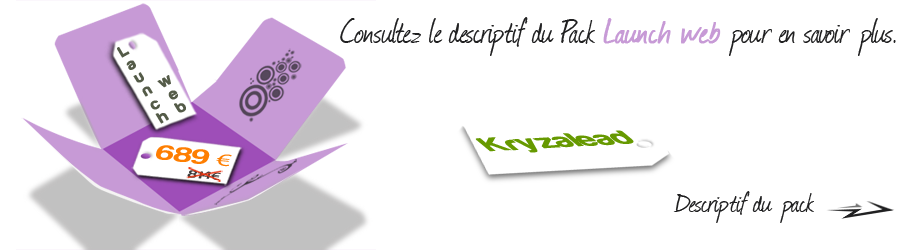
<style>
.page{position:relative;width:900px;height:250px;background:#ffffff}
.page>*{position:absolute;margin:0}
.t1{font:40px "Journal";color:#202021;scale:0.9 1}
.t2{font:42px "Journal";color:#c79ad6;font-weight:bold;scale:0.9 1}
.t3{font:17px "Harabara";color:#545b48;font-weight:bold;scale:0.92 1}
.t4{font:29.4px "Harabara";color:#669900;font-weight:bold;scale:1.19 1}
.t5{font:22px "Harabara";color:#fe7e01;scale:1.56 1}
.t6{font:18px "MyriadPro-Regular";color:#fe7e01;scale:1.56 1}
.t7{font:10.9px "Harabara";scale:1.64 1}
.t8{font:10.9px "MyriadPro-Regular";scale:1.64 1}
.t9{font:32px "Journal";color:#202021}
</style>
<div class="page">
<p class="t1" style="left:340px;top:17px;width:556px;height:39px">Consultez le descriptif du Pack <span class="t2">Launch web</span> pour en savoir plus.</p>
<p class="t3" style="left:117px;top:47px;width:69px;height:77px;text-align:right;rotate:-29deg">web<br>Launch</p>
<p class="t4" style="left:475px;top:130px;width:159px;height:23px;rotate:-3deg">Kryzalead</p>
<p class="t5" style="left:156px;top:145px;width:76px;height:22px;rotate:5deg">689 <span class="t6">€</span></p>
<p class="t7" style="left:187px;top:170px;width:34px;height:10px;rotate:7deg">814<span class="t8">€</span></p>
<p class="t9" style="left:673px;top:191px;width:141px;height:32px">Descriptif du pack</p>
</div>
